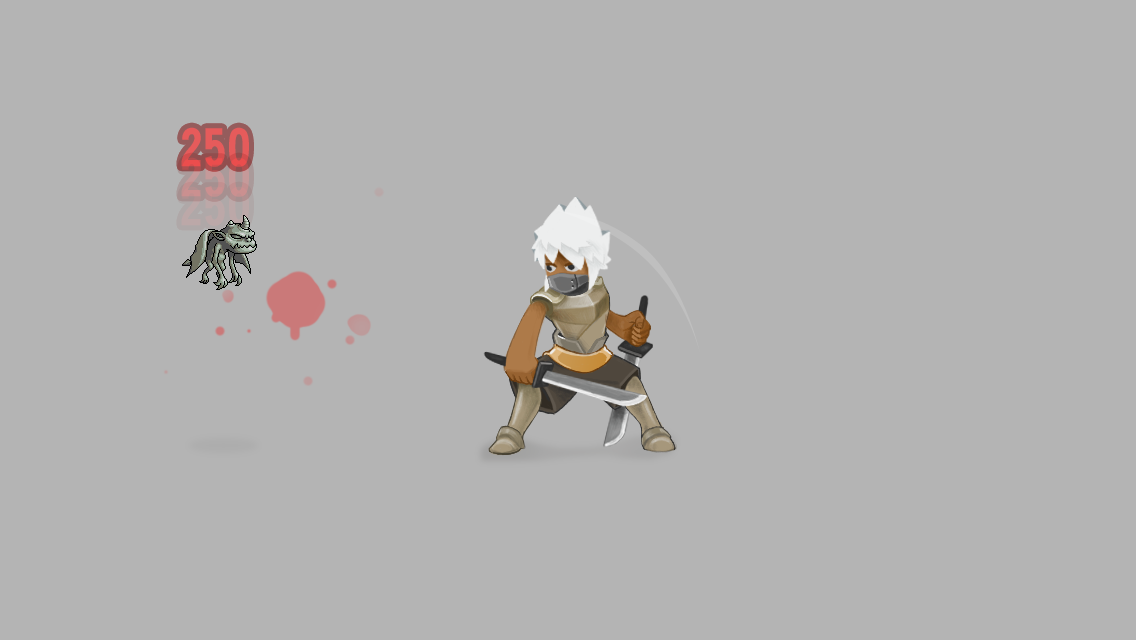
<style>
.page{position:relative;width:1136px;height:640px;background:#b4b4b4}
.page>*{position:absolute;margin:0}
.t1{font:48px "LinGothic-Heavy";color:#e65b5b}
.t2{font:48px "LinGothic-Heavy"}
</style>
<div class="page">
<p class="t1" style="left:181px;top:127px;width:68px;height:40px">250</p>
<p class="t2" style="left:181px;top:157px;width:68px;height:40px">250</p>
</div>
